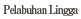
<style>
.page{position:relative;width:81px;height:19px;background:#ffffff}
.page>*{position:absolute;margin:0}
.t1{font:12px "RyuminPro-ExBold";letter-spacing:-0.08em;color:#4c4843;scale:0.85 1}
</style>
<div class="page">
<p class="t1" style="left:3px;top:5px;width:76px;height:11px">Pelabuhan Lingga</p>
</div>
